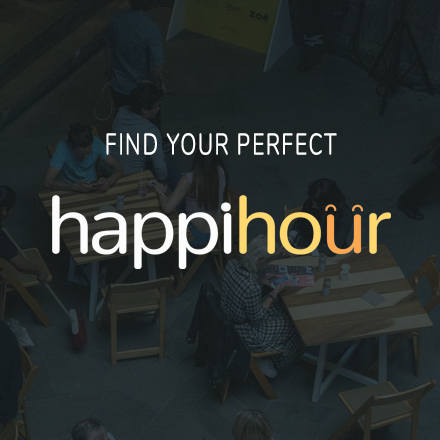
<style>
.page{position:relative;width:440px;height:440px}
.page>*{position:absolute;margin:0}
.t1{font:30px "Nunito-Regular";letter-spacing:0.075em;color:#ffffff;text-transform:uppercase;scale:0.7 1}
</style>
<div class="page">
<p class="t1" style="left:106px;top:133px;width:231px;height:22px">find your perfect</p>
</div>
